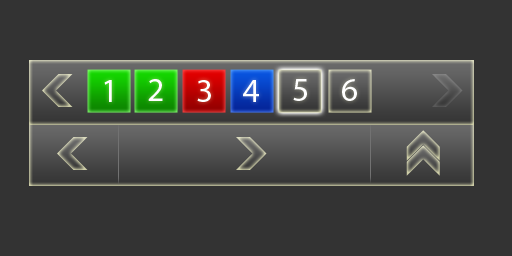
<style>
.page{position:relative;width:512px;height:256px;background:#333333}
.page>*{position:absolute;margin:0}
.t1{font:33.3px "MyriadPro-Regular";color:#ffffff}
</style>
<div class="page">
<p class="t1" style="left:104px;top:80px;width:8px;height:22px">1</p>
<p class="t1" style="left:148px;top:79px;width:15px;height:22px">2</p>
<p class="t1" style="left:197px;top:80px;width:14px;height:22px">3</p>
<p class="t1" style="left:243px;top:80px;width:16px;height:22px">4</p>
<p class="t1" style="left:293px;top:79px;width:14px;height:22px">5</p>
<p class="t1" style="left:342px;top:79px;width:15px;height:22px">6</p>
</div>
